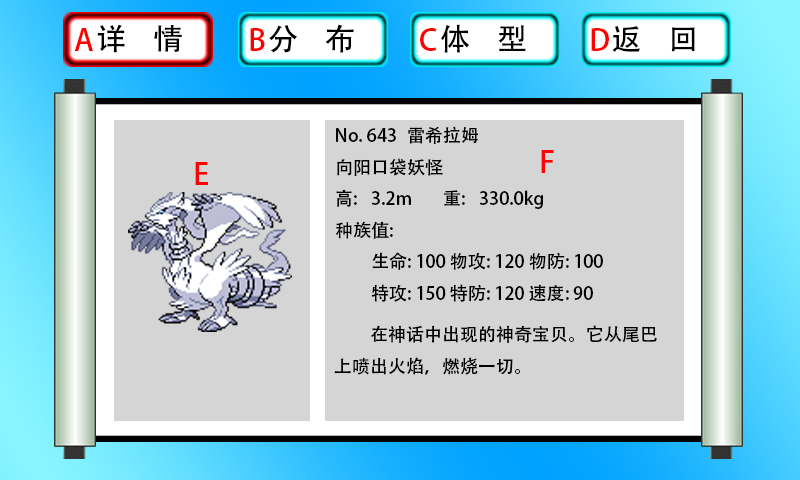
<style>
.page{position:relative;width:800px;height:480px;background:#d5d5d5}
.page>*{position:absolute;margin:0}
.t1{font:30px "AdobeHeitiStd-Regular";color:#ff0000}
.t2{font:30px "AdobeHeitiStd-Regular";color:#000000}
.t3{font:18px "AdobeHeitiStd-Regular";color:#000000}
</style>
<div class="page">
<p class="t1" style="left:74px;top:28px;width:19px;height:23px">A</p>
<p class="t2" style="left:97px;top:24px;width:85px;height:29px">详    情</p>
<p class="t1" style="left:250px;top:28px;width:15px;height:23px">B</p>
<p class="t2" style="left:269px;top:24px;width:85px;height:29px">分    布</p>
<p class="t1" style="left:420px;top:28px;width:17px;height:23px">C</p>
<p class="t2" style="left:441px;top:24px;width:85px;height:29px">体    型</p>
<p class="t1" style="left:591px;top:28px;width:18px;height:23px">D</p>
<p class="t2" style="left:612px;top:26px;width:83px;height:26px">返    回</p>
<p class="t3" style="left:336px;top:126px;width:267px;height:176px">No. 643 雷希拉姆<br>向阳口袋妖怪<br>高: 3.2m 重: 330.0kg<br>种族值:<br> 生命: 100 物攻: 120 物防: 100<br> 特攻: 150 特防: 120 速度: 90</p>
<p class="t1" style="left:541px;top:150px;width:13px;height:23px">F</p>
<p class="t1" style="left:195px;top:162px;width:13px;height:23px">E</p>
<p class="t3" style="left:334px;top:325px;width:323px;height:50px">在神话中出现的神奇宝贝。它从尾巴上喷出火焰，燃烧一切。</p>
</div>
